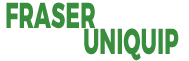
<style>
.page{position:relative;width:189px;height:61px;background:#ffffff}
.page>*{position:absolute;margin:0}
.t1{font:36px "Montserrat-ExtraBold";color:#388e3c;scale:0.6 1}
</style>
<div class="page">
<p class="t1" style="left:6px;top:2px;width:90px;height:27px">FRASER</p>
<p class="t1" style="left:84px;top:28px;width:95px;height:33px">UNIQUIP</p>
</div>
